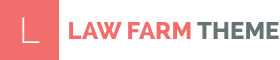
<style>
.page{position:relative;width:280px;height:60px;background:#ffffff}
.page>*{position:absolute;margin:0}
.t1{font:36px "Raleway-Light";color:#ffffff}
.t2{font:24px "Raleway-ExtraBold";color:#f26e6d;text-transform:uppercase}
.t3{font:24px "Raleway-ExtraBold";color:#677374;text-transform:uppercase}
</style>
<div class="page">
<p class="t1" style="left:22px;top:17px;width:18px;height:26px">L</p>
<p class="t2" style="left:69px;top:21px;width:210px;height:18px">law farm<span class="t3"> theme</span></p>
</div>
